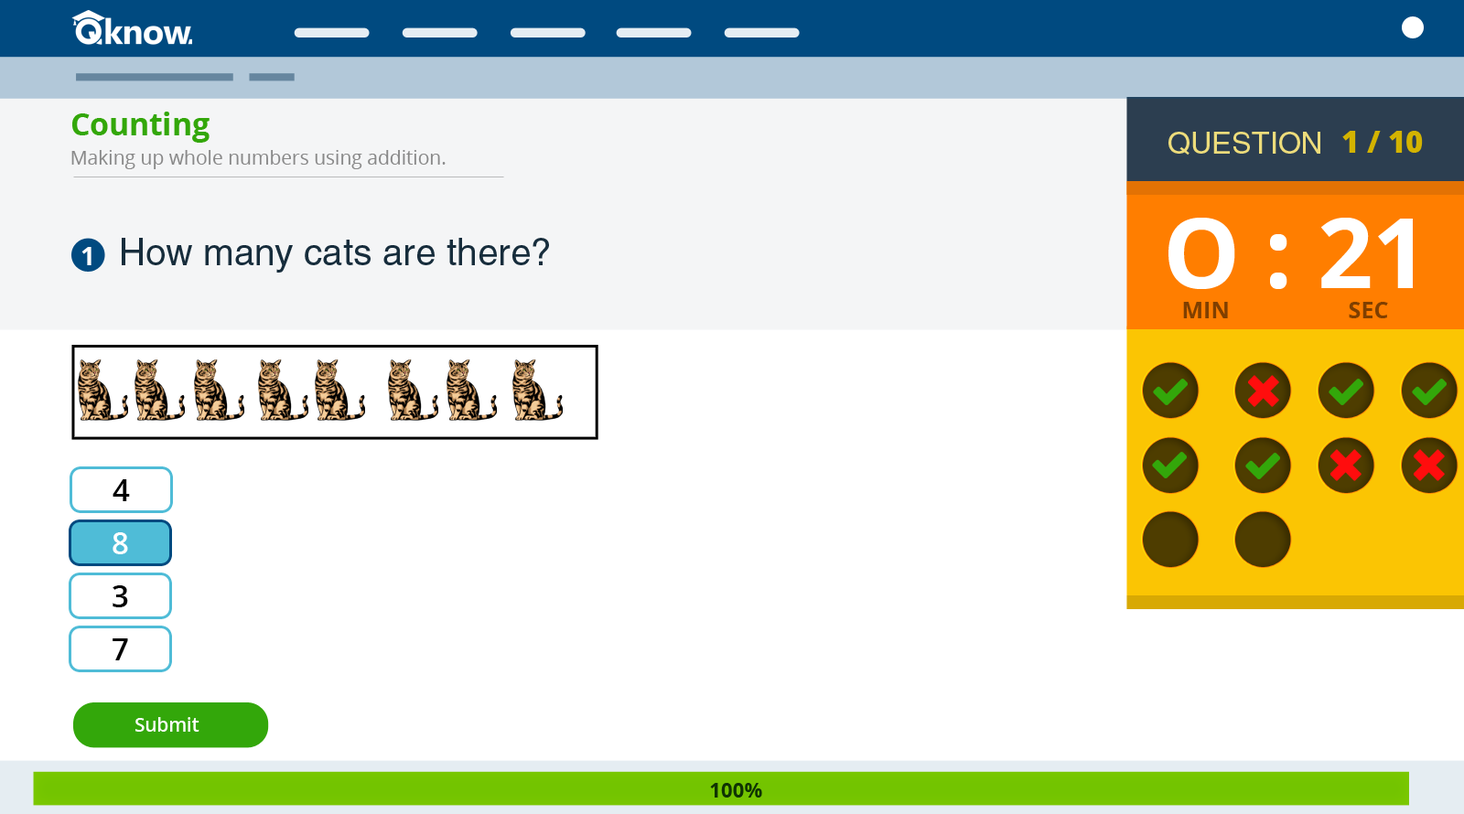
<style>
.page{position:relative;width:1464px;height:814px;background:#ffffff}
.page>*{position:absolute;margin:0}
.t1{font:19.2px/29.2px "OpenSans";color:#898989}
.t2{font:30.7px/29.2px "OpenSans-Bold";color:#33a70a}
.t3{font:29.7px "Helvetica";color:#eddc7b}
.t4{font:30.3px "OpenSans-Extrabold";color:#d3b300}
.t5{font:96.6px "OpenSans-Bold";color:#ffffff}
.t6{font:37.2px "Helvetica";color:#172d3c}
.t7{font:25.4px "OpenSans-Bold";color:#ffffff}
.t8{font:22.9px "OpenSans-Bold";color:#7f3f00}
.t9{font:30.3px "OpenSans-Semibold";color:#000000}
.t10{font:30.3px "OpenSans-Semibold";color:#ffffff}
.t11{font:18.8px "OpenSans-Semibold";color:#ffffff}
.t12{font:20.4px "OpenSans-Bold";color:#0f3303}
</style>
<div class="page">
<p class="t1" style="left:71px;top:112px;width:375px;height:57px"><span class="t2">Counting<br></span>Making up whole numbers using addition.</p>
<p class="t3" style="left:1169px;top:132px;width:151px;height:24px">QUESTION</p>
<p class="t4" style="left:1342px;top:131px;width:81px;height:22px">1 / 10</p>
<p class="t5" style="left:1169px;top:218px;width:244px;height:71px">O : 21</p>
<p class="t6" style="left:122px;top:238px;width:427px;height:35px">How many cats are there?</p>
<p class="t7" style="left:81px;top:247px;width:11px;height:18px">1</p>
<p class="t8" style="left:1183px;top:302px;width:45px;height:16px">MIN</p>
<p class="t8" style="left:1349px;top:302px;width:39px;height:16px">SEC</p>
<p class="t9" style="left:113px;top:480px;width:17px;height:21px">4</p>
<p class="t10" style="left:113px;top:533px;width:15px;height:22px">8</p>
<p class="t9" style="left:113px;top:586px;width:15px;height:22px">3</p>
<p class="t9" style="left:113px;top:639px;width:15px;height:22px">7</p>
<p class="t11" style="left:135px;top:717px;width:64px;height:15px">Submit</p>
<p class="t12" style="left:710px;top:783px;width:52px;height:15px">100%</p>
</div>
